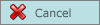
<style>
.page{position:relative;width:100px;height:25px;background:#bbe0e3}
.page>*{position:absolute;margin:0}
.t1{font:11px "Verdana";color:#4b5a5b}
</style>
<div class="page">
<p class="t1" style="left:16px;top:3px;width:76px;height:19px">Cancel</p>
</div>
